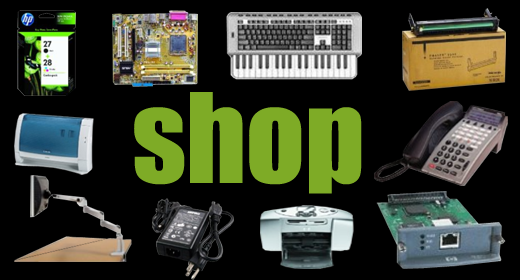
<style>
.page{position:relative;width:520px;height:280px;background:#000000}
.page>*{position:absolute;margin:0}
.t1{font:115px "Impact";color:#7eab26}
</style>
<div class="page">
<p class="t1" style="left:134px;top:92px;width:228px;height:102px">shop</p>
</div>
